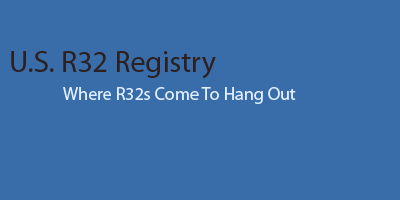
<style>
.page{position:relative;width:400px;height:200px;background:#396da9}
.page>*{position:absolute;margin:0}
.t1{font:30px "MyriadPro-Regular";color:#2d2020}
.t2{font:18px "MyriadPro-Regular";color:#e0eeff}
</style>
<div class="page">
<p class="t1" style="left:11px;top:51px;width:205px;height:28px">U.S. R32 Registry</p>
<p class="t2" style="left:63px;top:87px;width:233px;height:17px">Where R32s Come To Hang Out</p>
</div>
